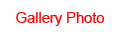
<style>
.page{position:relative;width:127px;height:40px;background:#ffffff}
.page>*{position:absolute;margin:0}
.t1{font:14.7px "ArialMT";color:#ff0000}
</style>
<div class="page">
<p class="t1" style="left:16px;top:12px;width:89px;height:14px">Gallery Photo</p>
</div>
